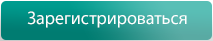
<style>
.page{position:relative;width:213px;height:41px}
.page>*{position:absolute;margin:0}
.t1{font:18px "MyriadPro-Regular";color:#ffffff}
</style>
<div class="page">
<p class="t1" style="left:27px;top:11px;width:160px;height:17px">Зарегистрироваться</p>
</div>
